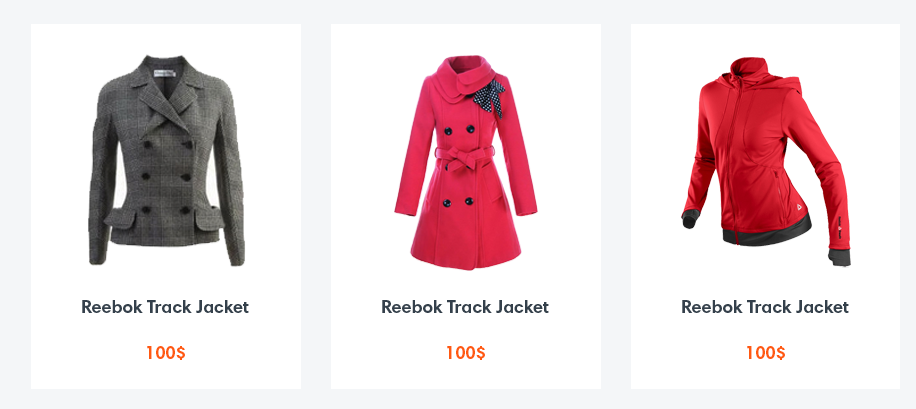
<style>
.page{position:relative;width:916px;height:409px;background:#ffffff}
.page>*{position:absolute;margin:0}
.t1{font:18px "HarmoniaSansProCyr-Bold";color:#34404b}
.t2{font:18px "HarmoniaSansProCyr-Bold";color:#ff5912}
</style>
<div class="page">
<p class="t1" style="left:82px;top:300px;width:167px;height:13px">Reebok Track Jacket</p>
<p class="t1" style="left:382px;top:300px;width:167px;height:13px">Reebok Track Jacket</p>
<p class="t1" style="left:682px;top:300px;width:167px;height:13px">Reebok Track Jacket</p>
<p class="t2" style="left:147px;top:346px;width:38px;height:14px">$100</p>
<p class="t2" style="left:447px;top:346px;width:38px;height:14px">$100</p>
<p class="t2" style="left:747px;top:346px;width:38px;height:14px">$100</p>
</div>
